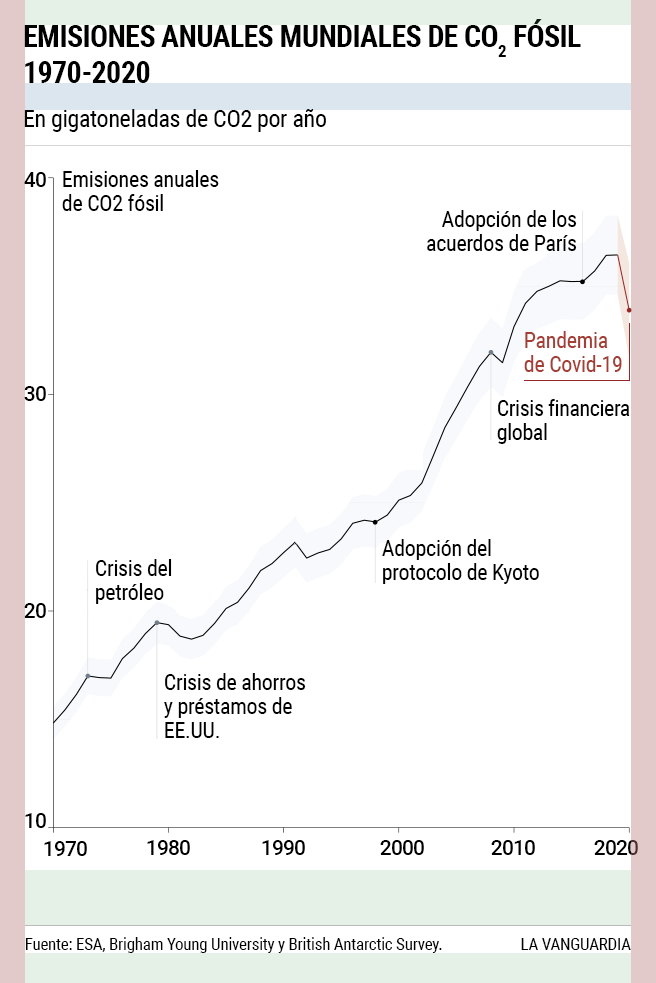
<style>
.page{position:relative;width:656px;height:983px;background:#ffffff}
.page>*{position:absolute;margin:0}
.t1{font:30px/36px "RobotoCondensed-Bold";letter-spacing:-0.02em;color:#000000;text-transform:uppercase}
.t2{font:24px "RobotoCondensed-Regular";letter-spacing:-0.014em;color:#000000}
.t3{font:21px "Roboto-Medium";letter-spacing:-0.04em;color:#000000}
.t4{font:22px/24px "RobotoCondensed-Regular";letter-spacing:-0.014em;color:#000000}
.t5{font:22px/24px "RobotoCondensed-Regular";letter-spacing:-0.014em;color:#a53f36}
.t6{font:22px/24px "RobotoCondensed-Regular";letter-spacing:-0.02em;color:#000000}
.t7{font:17px "RobotoCondensed-Regular";letter-spacing:-0.014em;color:#000000}
</style>
<div class="page">
<p class="t1" style="left:24px;top:19px;width:557px;height:64px">Emisiones anuales mundiales de CO2 fósil <br>1970-2020</p>
<p class="t2" style="left:24px;top:109px;width:302px;height:23px">En gigatoneladas de CO2 por año</p>
<p class="t3" style="left:24px;top:172px;width:22px;height:15px">40</p>
<p class="t4" style="left:62px;top:170px;width:157px;height:41px">Emisiones anuales de CO2 fósil</p>
<p class="t4" style="left:427px;top:210px;width:150px;height:41px;text-align:right">Adopción de los acuerdos de París</p>
<p class="t5" style="left:524px;top:331px;width:98px;height:41px">Pandemia <br>de Covid-19</p>
<p class="t3" style="left:24px;top:386px;width:22px;height:15px">30</p>
<p class="t6" style="left:497px;top:399px;width:133px;height:45px">Crisis financiera<br>global</p>
<p class="t4" style="left:382px;top:539px;width:157px;height:45px">Adopción del <br>protocolo de Kyoto</p>
<p class="t4" style="left:96px;top:559px;width:76px;height:45px">Crisis del petróleo</p>
<p class="t3" style="left:24px;top:603px;width:22px;height:15px">20</p>
<p class="t4" style="left:164px;top:673px;width:142px;height:65px">Crisis de ahorros y préstamos de EE.UU.</p>
<p class="t3" style="left:25px;top:813px;width:21px;height:15px">10</p>
<p class="t3" style="left:44px;top:841px;width:43px;height:15px">1970</p>
<p class="t3" style="left:147px;top:840px;width:43px;height:15px">1980</p>
<p class="t3" style="left:262px;top:840px;width:43px;height:15px">1990</p>
<p class="t3" style="left:380px;top:840px;width:44px;height:15px">2000</p>
<p class="t3" style="left:491px;top:840px;width:44px;height:15px">2010</p>
<p class="t3" style="left:594px;top:840px;width:44px;height:15px">2020</p>
<p class="t7" style="left:25px;top:937px;width:417px;height:16px">Fuente: ESA, Brigham Young University y British Antarctic Survey.</p>
<p class="t7" style="left:521px;top:938px;width:110px;height:12px">LA VANGUARDIA</p>
</div>
